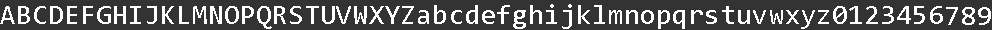
<style>
.page{position:relative;width:992px;height:30px;background:#333333}
.page>*{position:absolute;margin:0}
.t1{font:27.8px "Consolas";color:#ffffff;scale:0.96 1}
.t2{font:28px "Consolas";color:#ffffff}
.t3{font:28.1px "Consolas";color:#ffffff}
</style>
<div class="page">
<p class="t1" style="left:0px;top:6px;width:15px;height:18px">A</p>
<p class="t2" style="left:18px;top:6px;width:12px;height:18px">B</p>
<p class="t2" style="left:34px;top:6px;width:12px;height:18px">C</p>
<p class="t2" style="left:50px;top:6px;width:13px;height:18px">D</p>
<p class="t2" style="left:67px;top:6px;width:10px;height:18px">E</p>
<p class="t2" style="left:83px;top:6px;width:10px;height:18px">F</p>
<p class="t3" style="left:97px;top:6px;width:14px;height:18px">G</p>
<p class="t3" style="left:114px;top:6px;width:12px;height:18px">H</p>
<p class="t3" style="left:130px;top:6px;width:11px;height:18px">I</p>
<p class="t3" style="left:147px;top:6px;width:10px;height:18px">J</p>
<p class="t3" style="left:162px;top:6px;width:12px;height:18px">K</p>
<p class="t3" style="left:179px;top:6px;width:10px;height:18px">L</p>
<p class="t3" style="left:193px;top:6px;width:14px;height:18px">M</p>
<p class="t3" style="left:210px;top:6px;width:12px;height:18px">N</p>
<p class="t3" style="left:225px;top:6px;width:14px;height:18px">O</p>
<p class="t3" style="left:242px;top:6px;width:12px;height:18px">P</p>
<p class="t3" style="left:257px;top:6px;width:15px;height:23px">Q</p>
<p class="t3" style="left:274px;top:6px;width:12px;height:18px">R</p>
<p class="t3" style="left:290px;top:6px;width:12px;height:18px">S</p>
<p class="t3" style="left:306px;top:6px;width:13px;height:18px">T</p>
<p class="t3" style="left:322px;top:6px;width:13px;height:18px">U</p>
<p class="t3" style="left:336px;top:6px;width:15px;height:18px">V</p>
<p class="t3" style="left:354px;top:6px;width:13px;height:18px">W</p>
<p class="t3" style="left:369px;top:6px;width:15px;height:18px">X</p>
<p class="t3" style="left:385px;top:6px;width:15px;height:18px">Y</p>
<p class="t3" style="left:402px;top:6px;width:12px;height:18px">Z</p>
<p class="t2" style="left:434px;top:5px;width:12px;height:19px">b</p>
<p class="t2" style="left:466px;top:5px;width:12px;height:19px">d</p>
<p class="t2" style="left:497px;top:5px;width:13px;height:19px">f</p>
<p class="t3" style="left:530px;top:5px;width:12px;height:19px">h</p>
<p class="t3" style="left:546px;top:4px;width:11px;height:20px">i</p>
<p class="t3" style="left:562px;top:4px;width:10px;height:25px">j</p>
<p class="t3" style="left:578px;top:5px;width:12px;height:19px">k</p>
<p class="t3" style="left:594px;top:5px;width:11px;height:19px">l</p>
<p class="t3" style="left:722px;top:6px;width:12px;height:18px">t</p>
<p class="t3" style="left:833px;top:6px;width:14px;height:18px">0</p>
<p class="t3" style="left:849px;top:6px;width:13px;height:18px">1</p>
<p class="t3" style="left:866px;top:6px;width:12px;height:18px">2</p>
<p class="t3" style="left:882px;top:6px;width:12px;height:18px">3</p>
<p class="t3" style="left:897px;top:6px;width:14px;height:18px">4</p>
<p class="t3" style="left:914px;top:6px;width:11px;height:18px">5</p>
<p class="t3" style="left:930px;top:6px;width:13px;height:18px">6</p>
<p class="t1" style="left:418px;top:10px;width:11px;height:14px">a</p>
<p class="t2" style="left:451px;top:10px;width:11px;height:14px">c</p>
<p class="t2" style="left:482px;top:10px;width:13px;height:14px">e</p>
<p class="t3" style="left:513px;top:10px;width:13px;height:19px">g</p>
<p class="t3" style="left:609px;top:10px;width:13px;height:14px">m</p>
<p class="t3" style="left:626px;top:10px;width:12px;height:14px">n</p>
<p class="t3" style="left:641px;top:10px;width:13px;height:14px">o</p>
<p class="t3" style="left:658px;top:10px;width:12px;height:19px">p</p>
<p class="t3" style="left:673px;top:10px;width:12px;height:19px">q</p>
<p class="t3" style="left:691px;top:10px;width:12px;height:14px">r</p>
<p class="t3" style="left:706px;top:10px;width:11px;height:14px">s</p>
<p class="t3" style="left:738px;top:10px;width:12px;height:14px">u</p>
<p class="t3" style="left:753px;top:10px;width:13px;height:14px">v</p>
<p class="t3" style="left:770px;top:10px;width:13px;height:14px">w</p>
<p class="t3" style="left:786px;top:10px;width:13px;height:14px">x</p>
<p class="t3" style="left:801px;top:10px;width:14px;height:19px">y</p>
<p class="t3" style="left:818px;top:10px;width:11px;height:14px">z</p>
<p class="t3" style="left:946px;top:7px;width:12px;height:18px">7</p>
<p class="t3" style="left:962px;top:7px;width:13px;height:18px">8</p>
<p class="t3" style="left:978px;top:7px;width:13px;height:18px">9</p>
</div>
